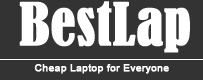
<style>
.page{position:relative;width:203px;height:80px;background:#333333}
.page>*{position:absolute;margin:0}
.t1{font:54.9px "BernardMT-Condensed";color:#ffffff;font-weight:bold}
.t2{font:10.5px "ArialMT";color:#ffffff;font-weight:bold}
</style>
<div class="page">
<p class="t1" style="left:19px;top:1px;width:171px;height:52px">BestLap</p>
<p class="t2" style="left:34px;top:64px;width:135px;height:10px">Cheap Laptop for Everyone</p>
</div>
